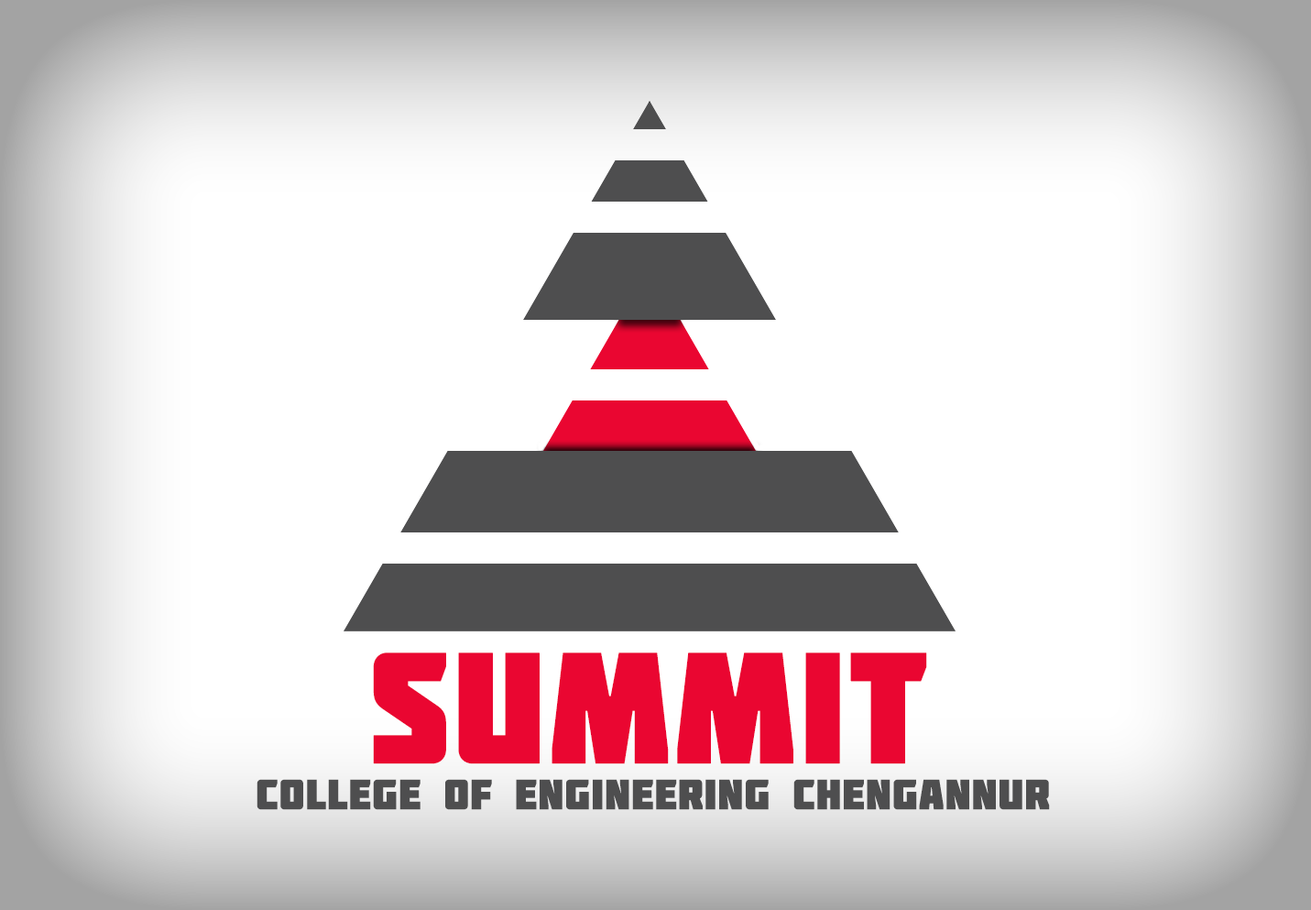
<style>
.page{position:relative;width:1311px;height:910px;background:#ffffff}
.page>*{position:absolute;margin:0}
.t1{font:157px "Molot";color:#ea0631;font-weight:bold}
.t2{font:42px "Molot";color:#4e4e4f;font-weight:bold}
</style>
<div class="page">
<p class="t1" style="left:373px;top:652px;width:554px;height:112px">SUMMIT</p>
<p class="t2" style="left:256px;top:779px;width:794px;height:31px">COLLEGE OF ENGINEERING CHENGANNUR</p>
</div>
